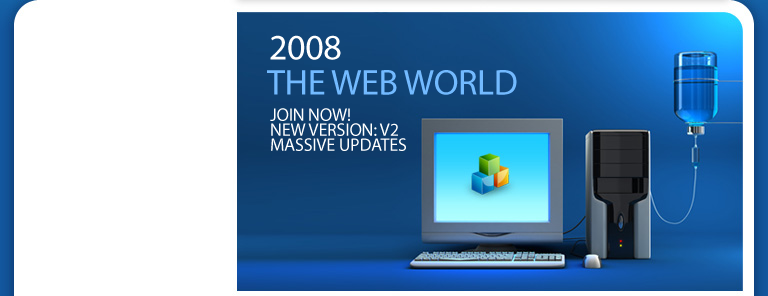
<style>
.page{position:relative;width:768px;height:296px;background:#ffffff}
.page>*{position:absolute;margin:0}
.t1{font:36px "MyriadPro-Regular";letter-spacing:-0.01em;color:#ffffff;text-transform:uppercase}
.t2{font:36px "MyriadPro-Regular";letter-spacing:-0.01em;color:#73baff;text-transform:uppercase}
.t3{font:18px/15px "MyriadPro-Regular";letter-spacing:-0.01em;color:#ffffff;text-transform:uppercase}
</style>
<div class="page">
<p class="t1" style="left:270px;top:35px;width:71px;height:25px">2008</p>
<p class="t2" style="left:267px;top:70px;width:250px;height:25px">The Web World</p>
<p class="t3" style="left:270px;top:108px;width:136px;height:43px">Join now!<br>New Version: V2<br>Massive updates</p>
</div>
